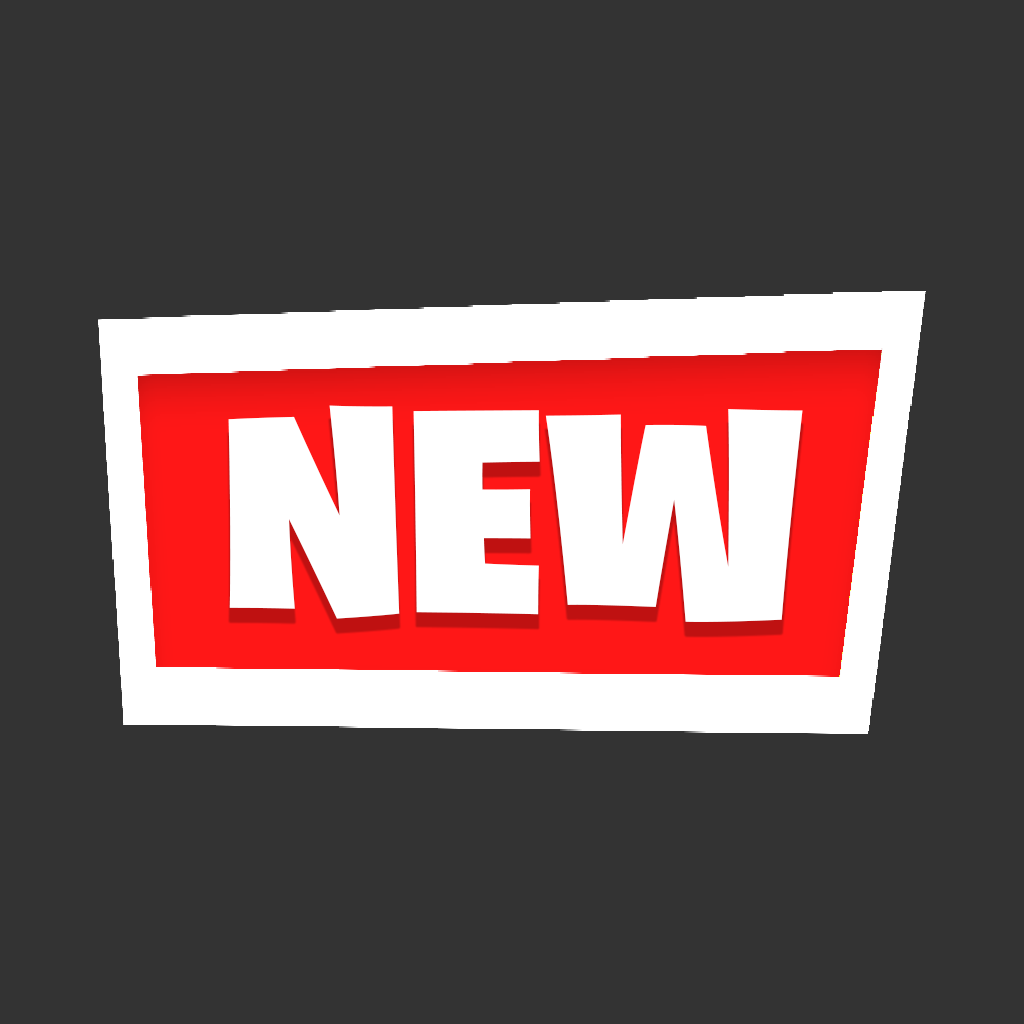
<style>
.page{position:relative;width:1024px;height:1024px;background:#333333}
.page>*{position:absolute;margin:0}
.t1{font:290.5px "BurbankBigCondensed-Black";color:#ffffff;scale:1.32 1}
</style>
<div class="page">
<p class="t1" style="left:228px;top:405px;width:575px;height:217px">NEW</p>
</div>
